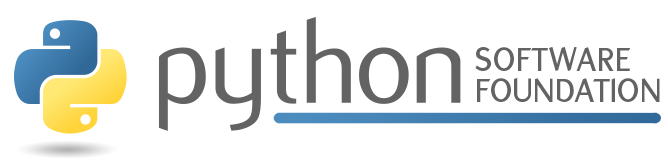
<style>
.page{position:relative;width:668px;height:164px;background:#ffffff}
.page>*{position:absolute;margin:0}
.t1{font:36px "Flux-Bold";letter-spacing:0.03em;color:#636363}
.t2{font:36px "Flux-Bold";color:#636363}
</style>
<div class="page">
<p class="t1" style="left:475px;top:46px;width:156px;height:25px">SOFTWARE</p>
<p class="t2" style="left:477px;top:77px;width:183px;height:25px">FOUNDATION</p>
</div>
